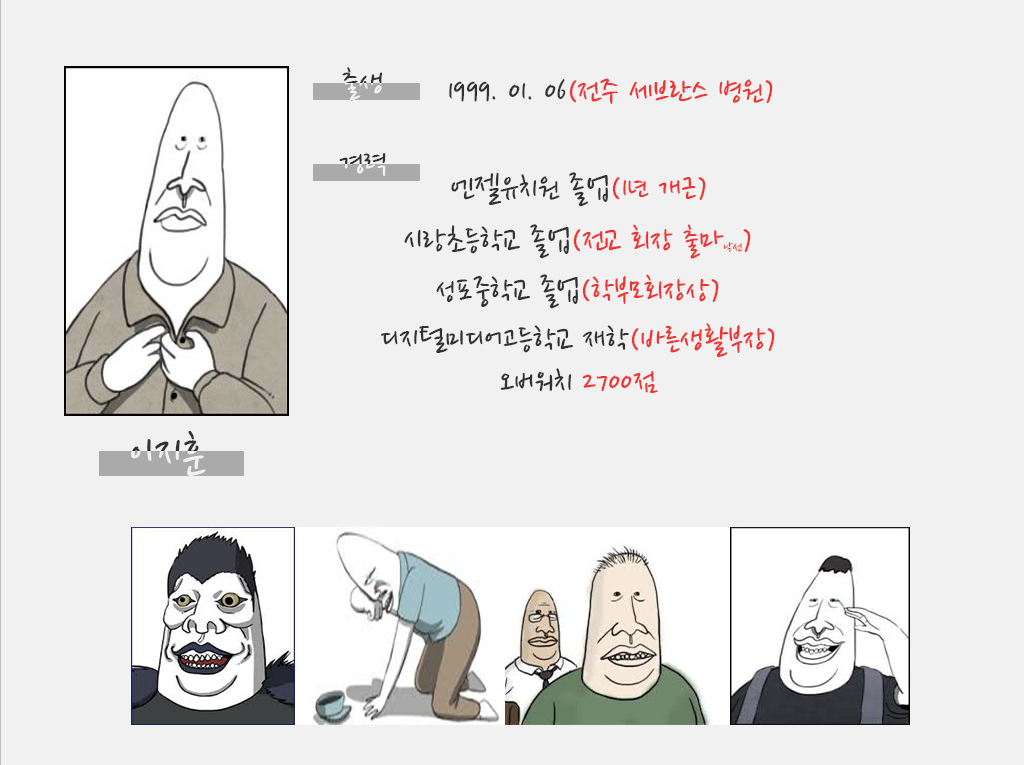
<style>
.page{position:relative;width:1024px;height:765px;background:#f1f1f1}
.page>*{position:absolute;margin:0}
.t1{font:34.5px "NanumPen";scale:1.07 1}
.t2{font:35px "NanumPen"}
.t3{font:15px "NanumPen"}
</style>
<div class="page">
<p class="t1" style="left:342px;top:67px;width:40px;height:34px">출생</p>
<p class="t1" style="left:342px;top:67px;width:40px;height:34px">출생</p>
<p class="t2" style="left:449px;top:78px;width:324px;height:26px">1999. 01. 06(전주 세브란스 병원)</p>
<p class="t1" style="left:339px;top:153px;width:47px;height:23px">경력</p>
<p class="t1" style="left:339px;top:153px;width:47px;height:23px">경력</p>
<p class="t2" style="left:451px;top:172px;width:255px;height:35px">엔젤유치원 졸업(1년 개근)</p>
<p class="t2" style="left:404px;top:224px;width:347px;height:35px">시랑초등학교 졸업(전교 회장 출마<span class="t3">낙선</span>)</p>
<p class="t2" style="left:436px;top:274px;width:283px;height:35px">성포중학교 졸업(학부모회장상)</p>
<p class="t2" style="left:381px;top:323px;width:394px;height:35px">디지털미디어고등학교 재학(바른생활부장)</p>
<p class="t2" style="left:500px;top:368px;width:158px;height:25px">오버워치 2700점</p>
</div>
